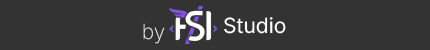
<style>
.page{position:relative;width:430px;height:50px;background:#333333}
.page>*{position:absolute;margin:0}
.t1{font:21px "Inter-Regular";color:#ffffff}
.t2{font:20.8px "Inter-ExtraLight";color:#ffffff}
</style>
<div class="page">
<p class="t1" style="left:224px;top:17px;width:62px;height:17px">Studio</p>
<p class="t2" style="left:143px;top:23px;width:22px;height:21px">by</p>
</div>
